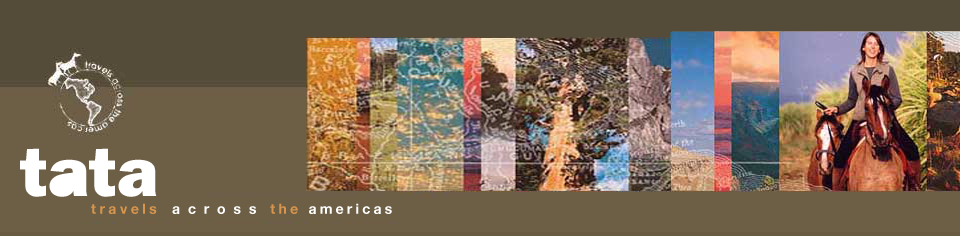
<style>
.page{position:relative;width:960px;height:236px;background:#6d5f45}
.page>*{position:absolute;margin:0}
.t1{font:70px "ITCFranklinGothicStd-Hvy";color:#ffffff}
.t2{font:14px "HelveticaNeue-Bold";letter-spacing:0.23em;color:#ffffff}
.t3{font:14px "HelveticaNeue-Bold";letter-spacing:0.25em;color:#d7954d}
.t4{font:14px "HelveticaNeue-Bold";letter-spacing:0.56em;color:#ffffff}
.t5{font:14px "HelveticaNeue-Bold";letter-spacing:0.36em;color:#ffffff}
.t6{font:14px "HelveticaNeue-Bold";letter-spacing:0.23em;color:#d7954d}
</style>
<div class="page">
<p class="t1" style="left:20px;top:148px;width:137px;height:49px">tata</p>
<p class="t2" style="left:91px;top:203px;width:301px;height:11px"><span class="t3">travels </span><span class="t4">acros</span><span class="t5">s </span><span class="t6">the </span>americas</p>
</div>
